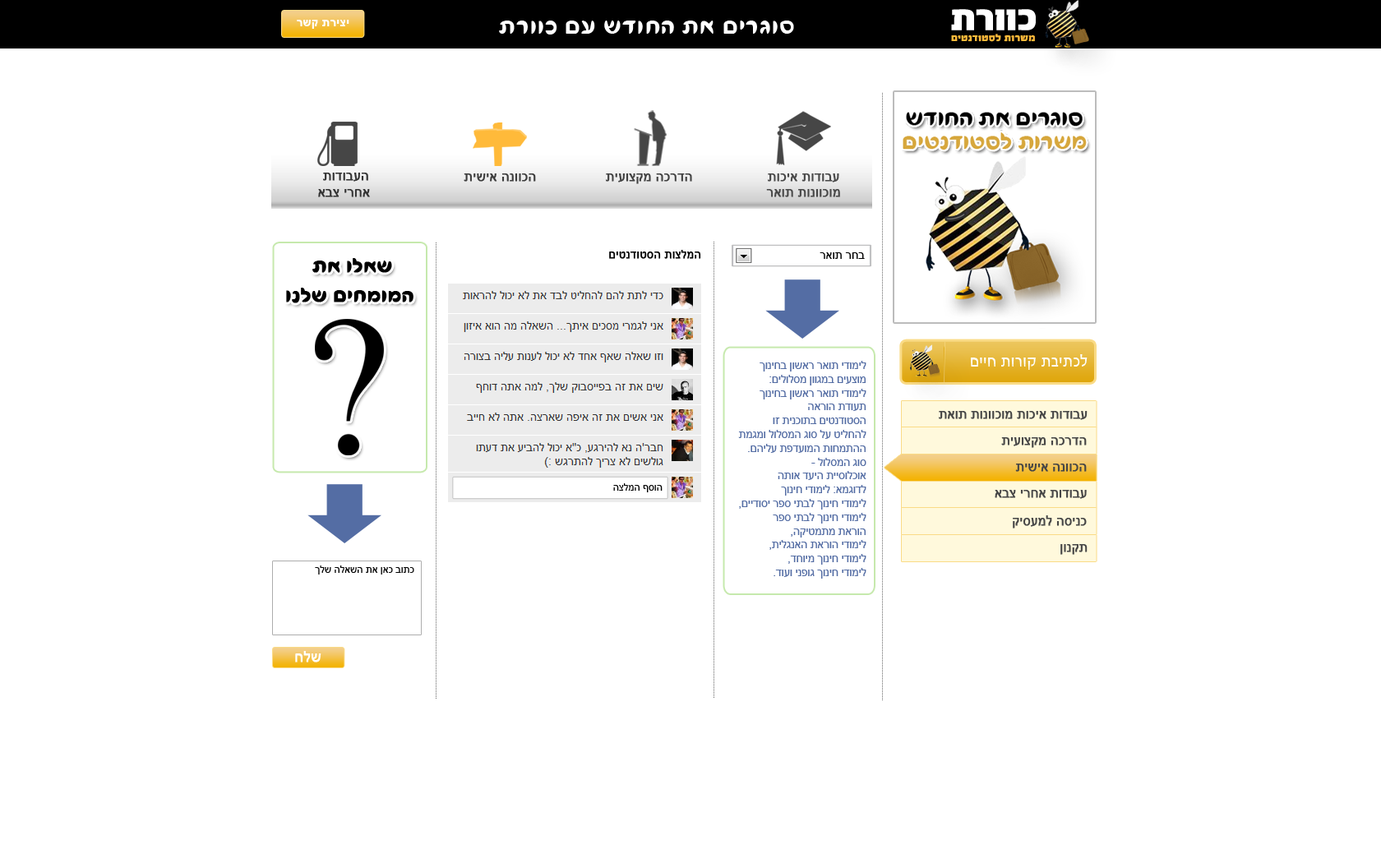
<style>
.page{position:relative;width:1381px;height:863px;background:#ffffff}
.page>*{position:absolute;margin:0}
.t1{font:11.5px "Arial-BoldMT";letter-spacing:0.03em;color:#ffffff}
.t2{font:28.8px "FbFlamingo-Regular";letter-spacing:0.03em;color:#ffffff}
.t3{font:9.9px "FbAdrenalin-Black";letter-spacing:0.03em;color:#ffba3a}
.t4{font:13.2px "ArialMT";color:#333333;font-weight:bold}
.t5{font:13.2px "ArialMT";color:#3c3c3c;font-weight:bold}
.t6{font:13.2px "ArialMT";color:#414141;font-weight:bold}
.t7{font:13.2px "ArialMT";color:#484848;font-weight:bold}
.t8{font:11.5px "ArialMT";color:#000000;font-weight:bold}
.t9{font:11.5px "ArialMT";color:#000000}
.t10{font:24.7px "FbFlamingo-Regular";color:#000000;font-weight:bold}
.t11{font:11.5px "ArialMT";letter-spacing:-0.025em;color:#546da4}
.t12{font:16.4px "FbConcept-Regular";letter-spacing:0.03em;color:#ffffff}
.t13{font:12.9px "ArialMT";color:#464646;font-weight:bold}
.t14{font:9.9px "ArialMT";color:#000000}
.t15{font:14.8px "ArialMT";color:#ffffff;font-weight:bold}
</style>
<div class="page">
<p class="t1" style="left:297px;top:20px;width:52px;height:9px">רשק תריצי</p>
<p class="t2" style="left:499px;top:21px;width:295px;height:14px">תרווכ םע שדוחה תא םירגוס</p>
<p class="t3" style="left:951px;top:34px;width:84px;height:8px">םיטנדוטסל תורשמ</p>
<p class="t4" style="left:318px;top:173px;width:52px;height:24px;text-align:center">תודובעה<br>אבצ ירחא</p>
<p class="t5" style="left:464px;top:173px;width:72px;height:9px">תישיא הנווכה</p>
<p class="t6" style="left:606px;top:173px;width:86px;height:11px">תיעוצקמ הכרדה</p>
<p class="t7" style="left:766px;top:173px;width:74px;height:24px;text-align:center">תוכיא תודובע<br>ראות תונווכומ</p>
<p class="t8" style="left:609px;top:250px;width:92px;height:9px">םיטנדוטסה תוצלמה</p>
<p class="t9" style="left:820px;top:252px;width:45px;height:7px">ראות רחב</p>
<p class="t10" style="left:286px;top:258px;width:128px;height:45px;text-align:center">תא ולאש<br>ונלש םיחמומה</p>
<p class="t11" style="left:738px;top:361px;width:129px;height:218px;text-align:right">ךוניחב ןושאר ראות ידומיל<br>:םילולסמ ןווגמב םיעצומ<br> ךוניחב ןושאר ראות ידומיל<br>הארוה תדועת<br> וז תינכותב םיטנדוטסה<br> תמגמו לולסמה גוס לע טילחהל<br>.םהילע תפדעומה תוחמתהה<br> - לולסמה גוס<br>התוא דעיה תייסולכוא<br> ךוניח ידומיל :אמגודל<br> ,םיידוסי רפס יתבל ךוניח ידומיל<br> רפס יתבל ךוניח ידומיל<br> ,הקיטמתמ תארוה<br> ,תילגנאה תארוה ידומיל<br> ,דחוימ ךוניח ידומיל<br>.דועו ינפוג ךוניח ידומיל</p>
<p class="t12" style="left:971px;top:354px;width:117px;height:16px">םייח תורוק תביתכל</p>
<p class="t13" style="left:939px;top:411px;width:149px;height:9px">תאות תונווכומ תוכיא תודובע</p>
<p class="t13" style="left:1001px;top:437px;width:86px;height:11px">תיעוצקמ הכרדה</p>
<p class="t13" style="left:1015px;top:464px;width:72px;height:8px">תישיא הנווכה</p>
<p class="t14" style="left:613px;top:483px;width:50px;height:9px">הצלמה ףסוה</p>
<p class="t13" style="left:995px;top:490px;width:92px;height:9px">אבצ ירחא תודובע</p>
<p class="t13" style="left:1013px;top:516px;width:74px;height:13px">קיסעמל הסינכ</p>
<p class="t13" style="left:1061px;top:544px;width:27px;height:11px">ןונקת</p>
<p class="t14" style="left:315px;top:566px;width:99px;height:9px">ךלש הלאשה תא ןאכ בותכ</p>
<p class="t15" style="left:295px;top:651px;width:26px;height:12px">חלש</p>
</div>
